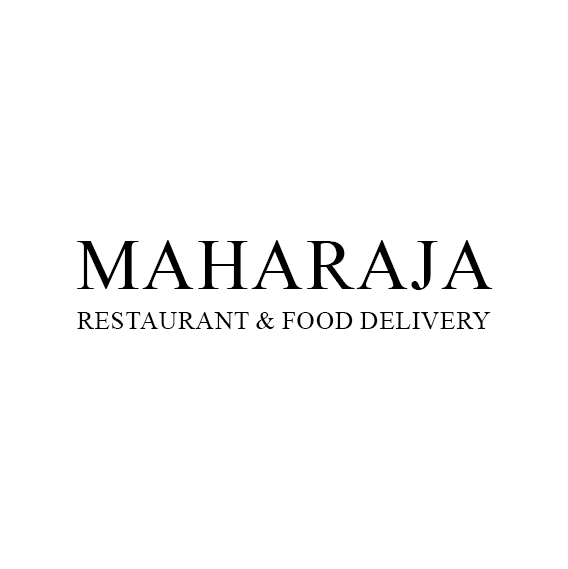
<style>
.page{position:relative;width:568px;height:569px;background:#ffffff}
.page>*{position:absolute;margin:0}
.t1{font:72px "TimesNewRomanPSMT";color:#000000;text-transform:uppercase}
.t2{font:25.2px "TimesNewRomanPSMT";color:#000000;text-transform:uppercase}
</style>
<div class="page">
<p class="t1" style="left:77px;top:240px;width:416px;height:50px">Maharaja</p>
<p class="t2" style="left:77px;top:312px;width:414px;height:18px">restaurant &amp; food delivery</p>
</div>
